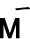
<style>
.page{position:relative;width:30px;height:39px;background:#ffffff}
.page>*{position:absolute;margin:0}
.t1{font:18px "DFKaiShu-SB-Estd-BF";color:#000000;font-weight:bold}
.t2{font:27px "ArialMT";color:#000000;font-weight:bold}
</style>
<div class="page">
<p class="t1" style="left:15px;top:7px;width:15px;height:4px">一</p>
<p class="t2" style="left:0px;top:18px;width:20px;height:21px">M</p>
</div>
